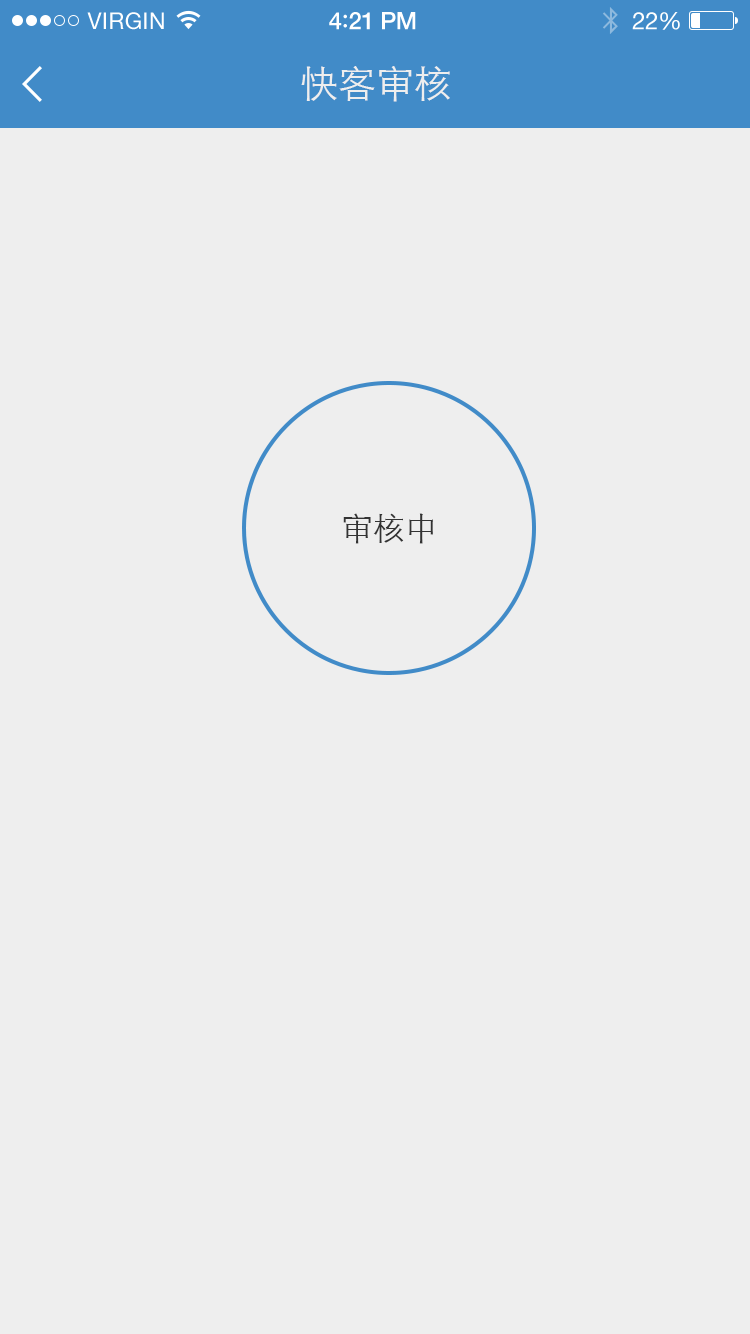
<style>
.page{position:relative;width:750px;height:1334px;background:#eeeeee}
.page>*{position:absolute;margin:0}
.t1{font:23px "HelveticaNeue";letter-spacing:0.02em;color:#ffffff}
.t2{font:24px "HelveticaNeue-Medium";letter-spacing:-0.02em;color:#ffffff}
.t3{font:26px "Avenir-Medium";letter-spacing:-0.02em;color:#ffffff}
.t4{font:24px "HelveticaNeue";letter-spacing:-0.02em;color:#ffffff}
.t5{font:38px "STXihei";color:#eeeeee}
.t6{font:32px "STXihei";color:#333333}
</style>
<div class="page">
<p class="t1" style="left:87px;top:12px;width:77px;height:18px">VIRGIN</p>
<p class="t2" style="left:329px;top:12px;width:87px;height:18px">4<span class="t3">:</span>21 PM</p>
<p class="t4" style="left:632px;top:12px;width:48px;height:18px">22%</p>
<p class="t5" style="left:301px;top:66px;width:149px;height:36px">快客审核</p>
<p class="t6" style="left:343px;top:513px;width:90px;height:31px">审核中</p>
</div>
